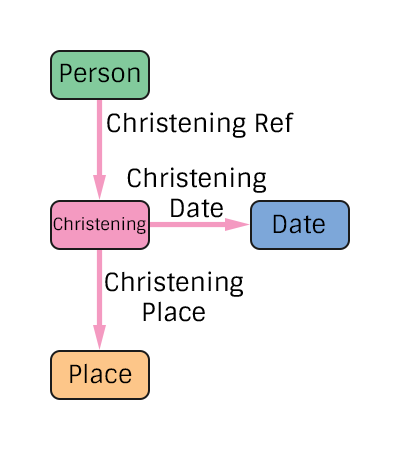
<style>
.page{position:relative;width:400px;height:450px;background:#ffffff}
.page>*{position:absolute;margin:0}
.t1{font:25px "Sintony";color:#000000}
.t2{font:16.7px "Sintony";color:#000000}
</style>
<div class="page">
<p class="t1" style="left:60px;top:63px;width:80px;height:20px">Person</p>
<p class="t1" style="left:107px;top:112px;width:187px;height:26px">Christening Ref</p>
<p class="t1" style="left:127px;top:167px;width:139px;height:51px;text-align:center">Christening<br>Date</p>
<p class="t2" style="left:53px;top:217px;width:93px;height:18px">Christening</p>
<p class="t1" style="left:273px;top:214px;width:52px;height:20px">Date</p>
<p class="t1" style="left:105px;top:271px;width:138px;height:51px;text-align:center">Christening<br>Place</p>
<p class="t1" style="left:70px;top:363px;width:62px;height:21px">Place</p>
</div>
